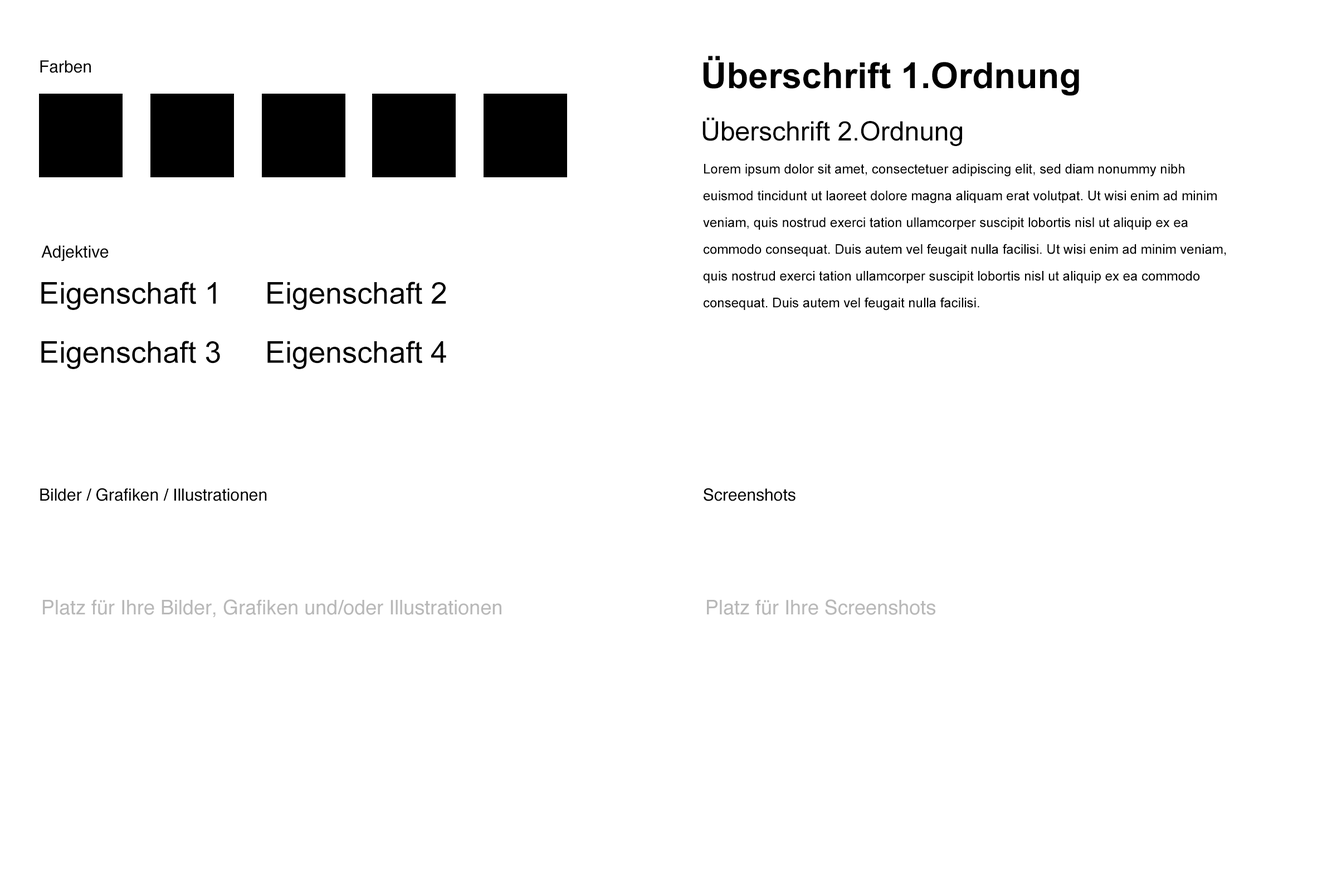
<style>
.page{position:relative;width:1337px;height:892px;background:#ffffff}
.page>*{position:absolute;margin:0}
.t1{font:16.7px "Helvetica";color:#000000}
.t2{font:35.7px "Arial-BoldMT";color:#000000}
.t3{font:26.7px "ArialMT";color:#000000}
.t4{font:13.4px/26.7px "ArialMT";color:#000000}
.t5{font:30.1px "ArialMT";color:#000000}
.t6{font:20.1px "Helvetica";color:#b8b8b8}
</style>
<div class="page">
<p class="t1" style="left:40px;top:60px;width:51px;height:13px">Farben</p>
<p class="t2" style="left:703px;top:56px;width:376px;height:40px">Überschrift 1.Ordnung</p>
<p class="t3" style="left:703px;top:118px;width:259px;height:28px">Überschrift 2.Ordnung</p>
<p class="t4" style="left:703px;top:164px;width:524px;height:146px">Lorem ipsum dolor sit amet, consectetuer adipiscing elit, sed diam nonummy nibh euismod tincidunt ut laoreet dolore magna aliquam erat volutpat. Ut wisi enim ad minim veniam, quis nostrud exerci tation ullamcorper suscipit lobortis nisl ut aliquip ex ea commodo consequat. Duis autem vel feugait nulla facilisi. Ut wisi enim ad minim veniam, quis nostrud exerci tation ullamcorper suscipit lobortis nisl ut aliquip ex ea commodo consequat. Duis autem vel feugait nulla facilisi.</p>
<p class="t1" style="left:41px;top:245px;width:68px;height:16px">Adjektive</p>
<p class="t5" style="left:41px;top:281px;width:175px;height:29px">Eigenschaft 1</p>
<p class="t5" style="left:267px;top:281px;width:179px;height:29px">Eigenschaft 2</p>
<p class="t5" style="left:41px;top:340px;width:179px;height:29px">Eigenschaft 3</p>
<p class="t5" style="left:267px;top:340px;width:179px;height:29px">Eigenschaft 4</p>
<p class="t1" style="left:40px;top:488px;width:227px;height:13px">Bilder / Grafiken / Illustrationen</p>
<p class="t1" style="left:704px;top:488px;width:92px;height:13px">Screenshots</p>
<p class="t6" style="left:43px;top:599px;width:459px;height:18px">Platz für Ihre Bilder, Grafiken und/oder Illustrationen</p>
<p class="t6" style="left:707px;top:599px;width:229px;height:16px">Platz für Ihre Screenshots</p>
</div>
